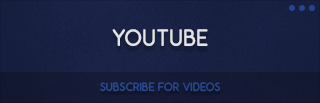
<style>
.page{position:relative;width:320px;height:103px}
.page>*{position:absolute;margin:0}
.t1{font:24px "OdinRounded";color:#e4e4e4}
.t2{font:12px "OdinRounded";color:#25458d}
</style>
<div class="page">
<p class="t1" style="left:112px;top:29px;width:96px;height:17px">YOUTUBE</p>
<p class="t2" style="left:100px;top:82px;width:121px;height:10px">SUBSCRIBE FOR VIDEOS</p>
</div>
